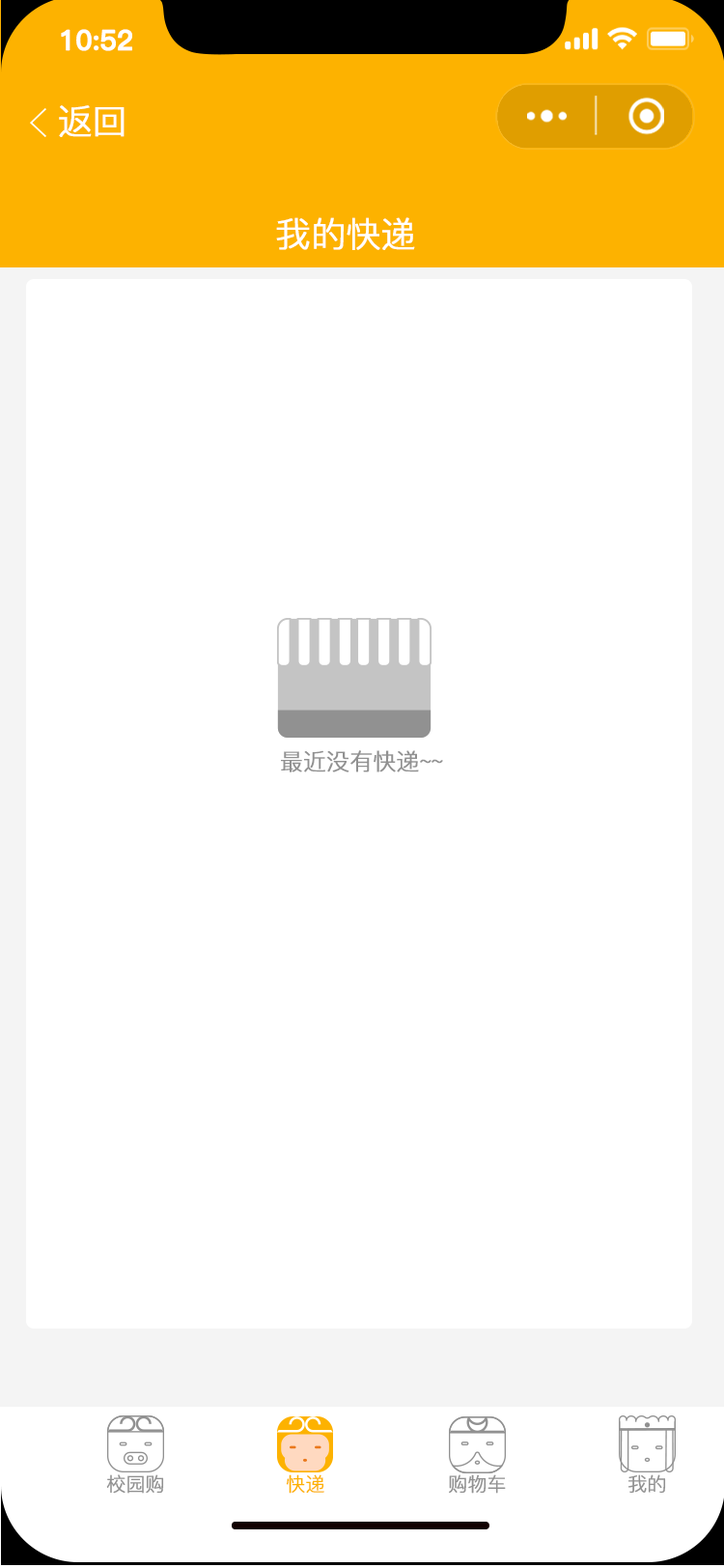
<style>
.page{position:relative;width:724px;height:1568px;background:#ffffff}
.page>*{position:absolute;margin:0}
.t1{font:27.5px "PingFang-SC-Bold";letter-spacing:-0.02em;color:#ffffff;font-weight:bold}
.t2{font:34.8px "PingFang-SC-Regular";letter-spacing:-0.02em;color:#ffffff;font-weight:bold}
.t3{font:23.2px "PingFang-SC-Regular";letter-spacing:-0.02em;color:#919191;font-weight:bold}
.t4{font:19.3px "PingFang-SC-Regular";letter-spacing:-0.02em;color:#919191;font-weight:bold}
.t5{font:19.3px "PingFang-SC-Regular";letter-spacing:-0.02em;color:#fdb200;font-weight:bold}
</style>
<div class="page">
<p class="t1" style="left:61px;top:29px;width:71px;height:22px">10:52</p>
<p class="t2" style="left:59px;top:105px;width:66px;height:32px">返回</p>
<p class="t2" style="left:276px;top:217px;width:139px;height:33px">我的快递</p>
<p class="t3" style="left:281px;top:750px;width:162px;height:22px">最近没有快递~~</p>
<p class="t4" style="left:106px;top:1474px;width:58px;height:20px">校园购</p>
<p class="t5" style="left:286px;top:1474px;width:38px;height:20px">快递</p>
<p class="t4" style="left:449px;top:1474px;width:57px;height:20px">购物车</p>
<p class="t4" style="left:629px;top:1474px;width:37px;height:20px">我的</p>
</div>
